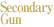
<style>
.page{position:relative;width:54px;height:27px;background:#ffffff}
.page>*{position:absolute;margin:0}
.t1{font:14px/12px "RyuminPro-ExBold";letter-spacing:-0.09em;color:#c4a956;scale:0.9 1}
</style>
<div class="page">
<p class="t1" style="left:0px;top:1px;width:54px;height:24px">Secondary<br>Gun</p>
</div>
